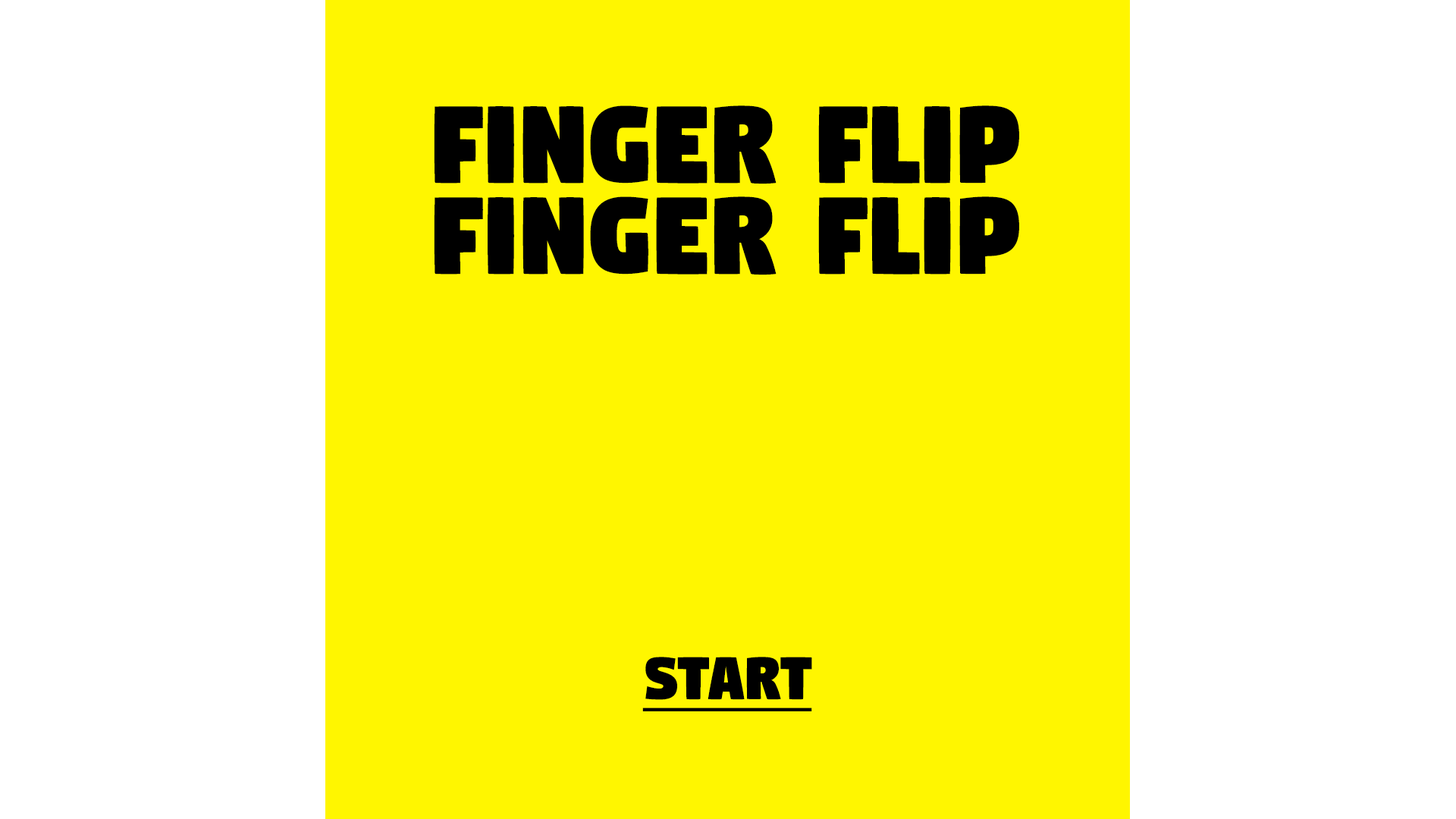
<style>
.page{position:relative;width:1456px;height:819px;background:#fff600}
.page>*{position:absolute;margin:0}
.t1{font:126.8px "Digitalt";color:#000000}
.t2{font:69.8px "Digitalt";color:#000000;text-decoration:underline}
</style>
<div class="page">
<p class="t1" style="left:434px;top:105px;width:585px;height:79px">FINGER FLIP</p>
<p class="t1" style="left:434px;top:196px;width:585px;height:79px">FINGER FLIP</p>
<p class="t2" style="left:642px;top:657px;width:170px;height:54px">start</p>
</div>
